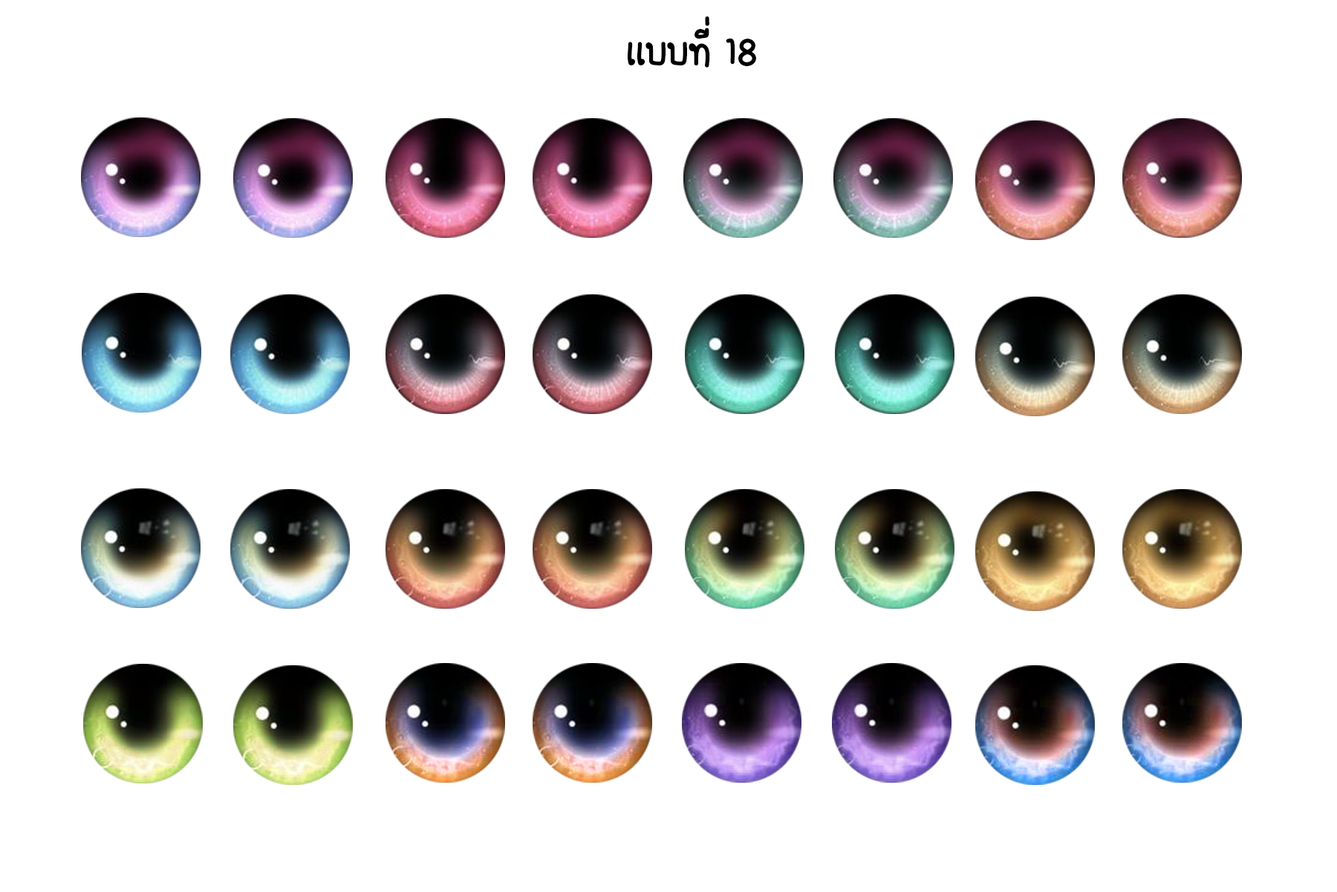
<style>
.page{position:relative;width:1337px;height:892px;background:#ffffff}
.page>*{position:absolute;margin:0}
.t1{font:55.7px "FCDaisyRegular";color:#000000}
</style>
<div class="page">
<p class="t1" style="left:627px;top:16px;width:129px;height:52px">เเบบที่ 18</p>
</div>
